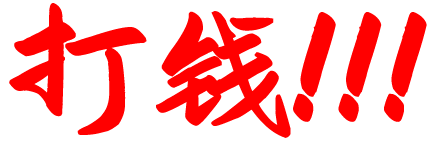
<style>
.page{position:relative;width:437px;height:141px;background:#ffffff}
.page>*{position:absolute;margin:0}
.t1{font:150px "hongleisim-Regular";letter-spacing:-0.1em;color:#ff0000;font-weight:bold}
</style>
<div class="page">
<p class="t1" style="left:9px;top:3px;width:418px;height:135px">打钱!!!</p>
</div>
